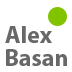
<style>
.page{position:relative;width:72px;height:72px;background:#ffffff}
.page>*{position:absolute;margin:0}
.t1{font:24px "MyriadPro-Bold";color:#686868}
</style>
<div class="page">
<p class="t1" style="left:5px;top:26px;width:47px;height:17px">Alex</p>
<p class="t1" style="left:6px;top:49px;width:61px;height:17px">Basan</p>
</div>
